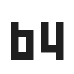
<style>
.page{position:relative;width:74px;height:74px;background:#ffffff}
.page>*{position:absolute;margin:0}
.t1{font:60px "04b24";color:#1f1f1f}
</style>
<div class="page">
<p class="t1" style="left:11px;top:22px;width:53px;height:38px">64</p>
</div>
